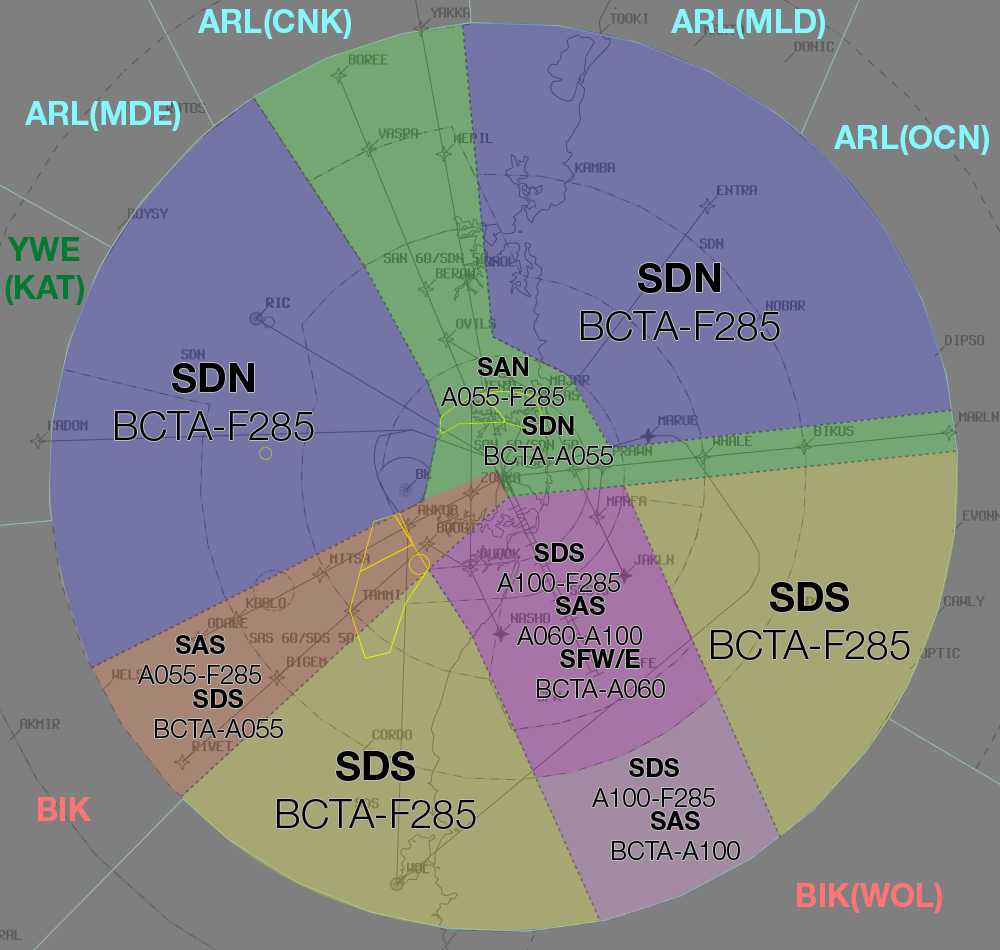
<style>
.page{position:relative;width:1000px;height:950px;background:#7f7f7f}
.page>*{position:absolute;margin:0}
.t1{font:32.2px "HelveticaNeueLTStd-Bd";color:#85f8ff}
.t2{font:32.2px "HelveticaNeueLTStd-Bd";color:#007b34}
.t3{font:40px "HelveticaNeueLTStd-Lt";color:#000000}
.t4{font:40px "HelveticaNeueLTStd-Bd";color:#000000}
.t5{font:25.3px "HelveticaNeueLTStd-Lt";color:#000000}
.t6{font:25.3px "HelveticaNeueLTStd-Bd";color:#000000}
.t7{font:32.2px "HelveticaNeueLTStd-Bd";color:#ff7575}
</style>
<div class="page">
<p class="t1" style="left:198px;top:9px;width:153px;height:30px">ARL(CNK)</p>
<p class="t1" style="left:671px;top:9px;width:154px;height:30px">ARL(MLD)</p>
<p class="t1" style="left:25px;top:101px;width:155px;height:30px">ARL(MDE)</p>
<p class="t1" style="left:834px;top:125px;width:155px;height:30px">ARL(OCN)</p>
<p class="t2" style="left:5px;top:237px;width:79px;height:68px;text-align:center">YWE<br>(KAT)</p>
<p class="t3" style="left:581px;top:263px;width:199px;height:78px;text-align:center"><span class="t4">SDN<br></span>BCTA-F285</p>
<p class="t3" style="left:115px;top:363px;width:199px;height:78px;text-align:center"><span class="t4">SDN<br></span>BCTA-F285</p>
<p class="t5" style="left:441px;top:357px;width:123px;height:49px;text-align:center"><span class="t6">SAN<br></span>A055-F285</p>
<p class="t5" style="left:485px;top:416px;width:128px;height:49px;text-align:center"><span class="t6">SDN<br></span>BCTA-A055</p>
<p class="t5" style="left:497px;top:543px;width:123px;height:49px;text-align:center"><span class="t6">SDS<br></span>A100-F285</p>
<p class="t3" style="left:711px;top:582px;width:199px;height:78px;text-align:center"><span class="t4">SDS<br></span>BCTA-F285</p>
<p class="t5" style="left:517px;top:596px;width:125px;height:49px;text-align:center"><span class="t6">SAS<br></span>A060-A100</p>
<p class="t5" style="left:138px;top:635px;width:123px;height:49px;text-align:center"><span class="t6">SAS<br></span>A055-F285</p>
<p class="t5" style="left:537px;top:649px;width:128px;height:49px;text-align:center"><span class="t6">SFW/E<br></span>BCTA-A060</p>
<p class="t5" style="left:155px;top:689px;width:128px;height:49px;text-align:center"><span class="t6">SDS<br></span>BCTA-A055</p>
<p class="t3" style="left:277px;top:751px;width:199px;height:78px;text-align:center"><span class="t4">SDS<br></span>BCTA-F285</p>
<p class="t5" style="left:592px;top:758px;width:123px;height:49px;text-align:center"><span class="t6">SDS<br></span>A100-F285</p>
<p class="t7" style="left:38px;top:797px;width:54px;height:24px">BIK</p>
<p class="t5" style="left:612px;top:811px;width:128px;height:49px;text-align:center"><span class="t6">SAS<br></span>BCTA-A100</p>
<p class="t7" style="left:797px;top:883px;width:145px;height:30px">BIK(WOL)</p>
</div>
